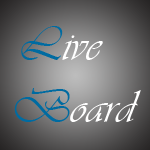
<style>
.page{position:relative;width:150px;height:150px}
.page>*{position:absolute;margin:0}
.t1{font:48px "Vivaldii";color:#ffffff}
.t2{font:48px "Vivaldii";color:#006ba1}
</style>
<div class="page">
<p class="t1" style="left:21px;top:26px;width:82px;height:34px"><span class="t2">L</span>ive</p>
<p class="t1" style="left:14px;top:88px;width:127px;height:34px"><span class="t2">B</span>oard</p>
</div>
